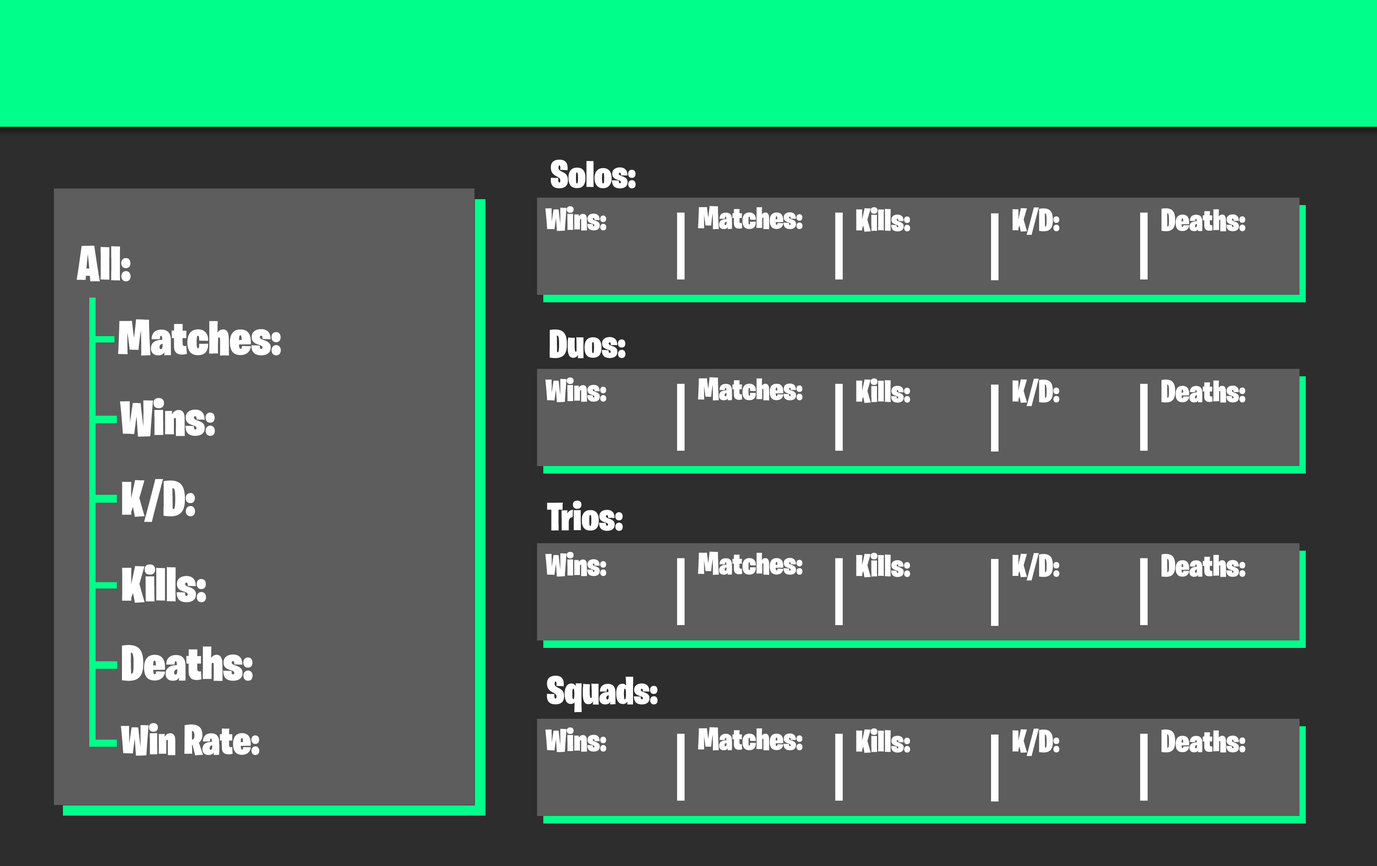
<style>
.page{position:relative;width:1377px;height:866px;background:#5d5d5d}
.page>*{position:absolute;margin:0}
.t1{font:39.4px "BurbankBigCondensed-Black";color:#ffffff}
.t2{font:31.5px "BurbankBigCondensed-Black";color:#ffffff}
.t3{font:49.4px "BurbankBigCondensed-Black";color:#ffffff}
.t4{font:41.6px "BurbankBigCondensed-Black";color:#ffffff}
</style>
<div class="page">
<p class="t1" style="left:551px;top:159px;width:85px;height:29px">Solos:</p>
<p class="t2" style="left:545px;top:206px;width:61px;height:25px">Wins:</p>
<p class="t2" style="left:698px;top:206px;width:105px;height:23px">Matches:</p>
<p class="t2" style="left:856px;top:207px;width:55px;height:25px">Kills:</p>
<p class="t2" style="left:1013px;top:207px;width:47px;height:28px">K/D:</p>
<p class="t2" style="left:1162px;top:208px;width:84px;height:23px">Deaths:</p>
<p class="t3" style="left:77px;top:246px;width:54px;height:35px">All:</p>
<p class="t3" style="left:118px;top:319px;width:163px;height:37px">Matches:</p>
<p class="t1" style="left:550px;top:329px;width:76px;height:29px">Duos:</p>
<p class="t2" style="left:545px;top:377px;width:61px;height:25px">Wins:</p>
<p class="t2" style="left:698px;top:377px;width:105px;height:24px">Matches:</p>
<p class="t2" style="left:856px;top:378px;width:55px;height:25px">Kills:</p>
<p class="t2" style="left:1013px;top:379px;width:47px;height:27px">K/D:</p>
<p class="t2" style="left:1162px;top:379px;width:84px;height:24px">Deaths:</p>
<p class="t3" style="left:120px;top:398px;width:95px;height:39px">Wins:</p>
<p class="t3" style="left:122px;top:479px;width:73px;height:43px">K/D:</p>
<p class="t1" style="left:547px;top:500px;width:76px;height:31px">Trios:</p>
<p class="t2" style="left:545px;top:552px;width:61px;height:25px">Wins:</p>
<p class="t2" style="left:698px;top:551px;width:105px;height:24px">Matches:</p>
<p class="t2" style="left:856px;top:553px;width:55px;height:24px">Kills:</p>
<p class="t2" style="left:1013px;top:553px;width:47px;height:27px">K/D:</p>
<p class="t2" style="left:1162px;top:554px;width:84px;height:23px">Deaths:</p>
<p class="t3" style="left:122px;top:564px;width:84px;height:39px">Kills:</p>
<p class="t3" style="left:122px;top:645px;width:131px;height:36px">Deaths:</p>
<p class="t1" style="left:547px;top:675px;width:111px;height:37px">Squads:</p>
<p class="t4" style="left:121px;top:723px;width:138px;height:33px">Win Rate:</p>
<p class="t2" style="left:545px;top:727px;width:61px;height:25px">Wins:</p>
<p class="t2" style="left:698px;top:727px;width:105px;height:23px">Matches:</p>
<p class="t2" style="left:856px;top:728px;width:55px;height:25px">Kills:</p>
<p class="t2" style="left:1013px;top:728px;width:47px;height:28px">K/D:</p>
<p class="t2" style="left:1162px;top:729px;width:84px;height:23px">Deaths:</p>
</div>
